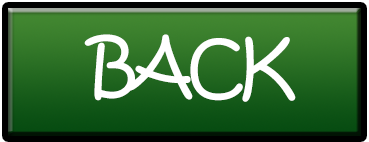
<style>
.page{position:relative;width:369px;height:142px}
.page>*{position:absolute;margin:0}
.t1{font:120px "KristenITC-Regular";letter-spacing:-0.1em;color:#ffffff}
.t2{font:20px "KristenITC-Regular";letter-spacing:-0.1em;color:#ffffff}
</style>
<div class="page">
<p class="t1" style="left:84px;top:34px;width:212px;height:68px"><span class="t2"><br><br><br><br><br></span>BACK</p>
</div>
